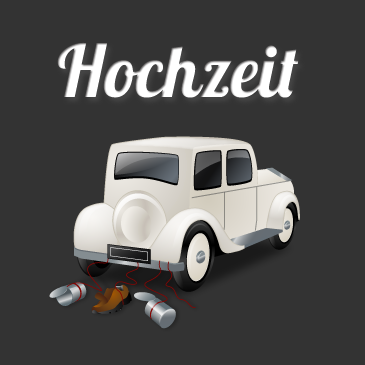
<style>
.page{position:relative;width:365px;height:365px;background:#333333}
.page>*{position:absolute;margin:0}
.t1{font:72px "Lobster1.4";color:#ffffff}
</style>
<div class="page">
<p class="t1" style="left:57px;top:42px;width:242px;height:56px">Hochzeit</p>
</div>
